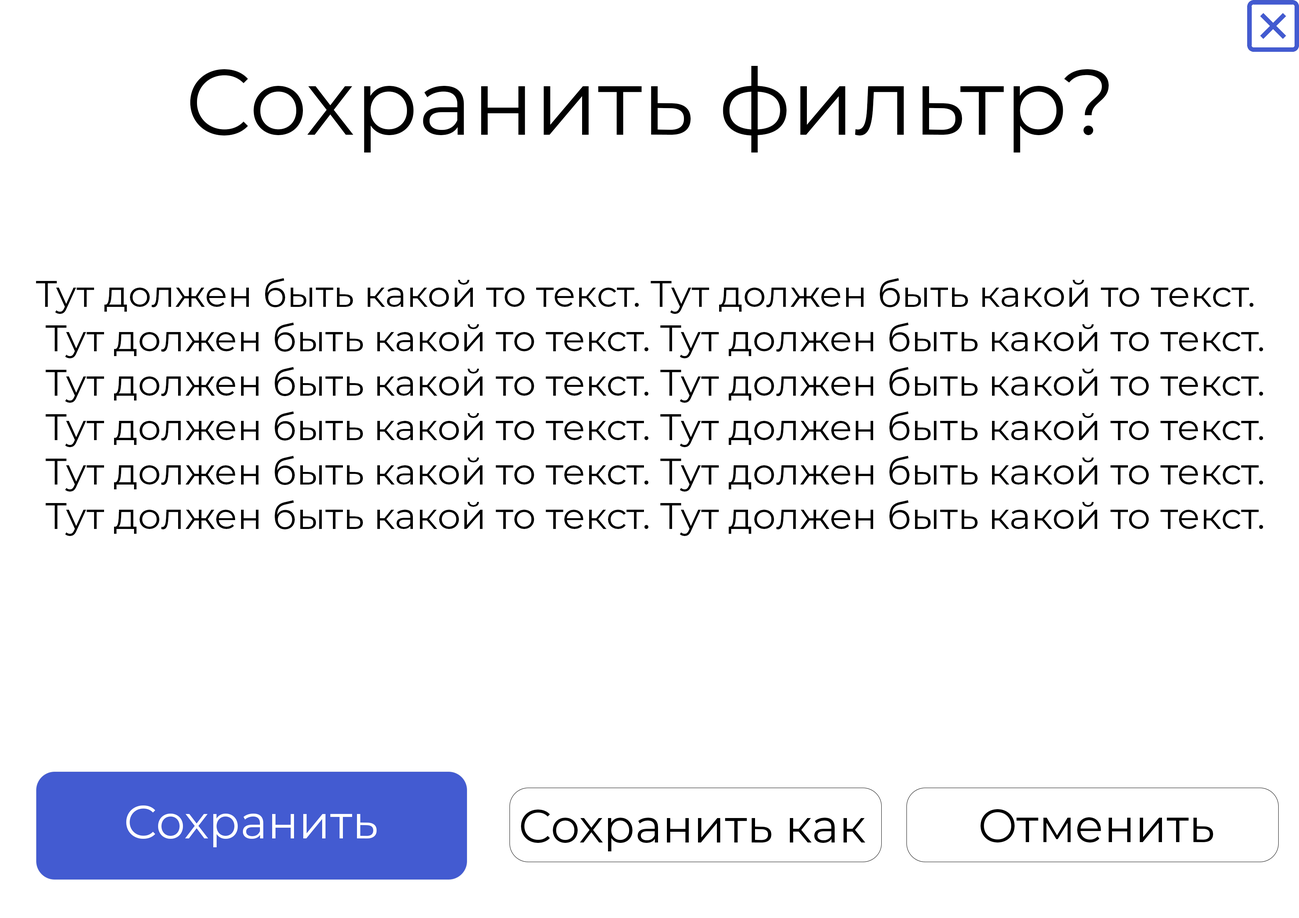
<style>
.page{position:relative;width:1299px;height:918px;background:#ffffff}
.page>*{position:absolute;margin:0}
.t1{font:92.6px "Montserrat-Regular";color:#000000}
.t2{font:37px "Montserrat-Regular";color:#000000}
.t3{font:46.3px "Montserrat-Regular";color:#ffffff}
.t4{font:46.3px "Montserrat-Regular";color:#000000}
</style>
<div class="page">
<p class="t1" style="left:190px;top:66px;width:918px;height:87px">Сохранить фильтр?</p>
<p class="t2" style="left:36px;top:278px;width:1227px;height:258px">Тут должен быть какой то текст. Тут должен быть какой то текст.<br> Тут должен быть какой то текст. Тут должен быть какой то текст.<br> Тут должен быть какой то текст. Тут должен быть какой то текст.<br> Тут должен быть какой то текст. Тут должен быть какой то текст.<br> Тут должен быть какой то текст. Тут должен быть какой то текст.<br> Тут должен быть какой то текст. Тут должен быть какой то текст.</p>
<p class="t3" style="left:126px;top:806px;width:251px;height:41px">Сохранить</p>
<p class="t4" style="left:521px;top:810px;width:344px;height:42px">Сохранить как</p>
<p class="t4" style="left:980px;top:809px;width:233px;height:34px">Отменить</p>
</div>
